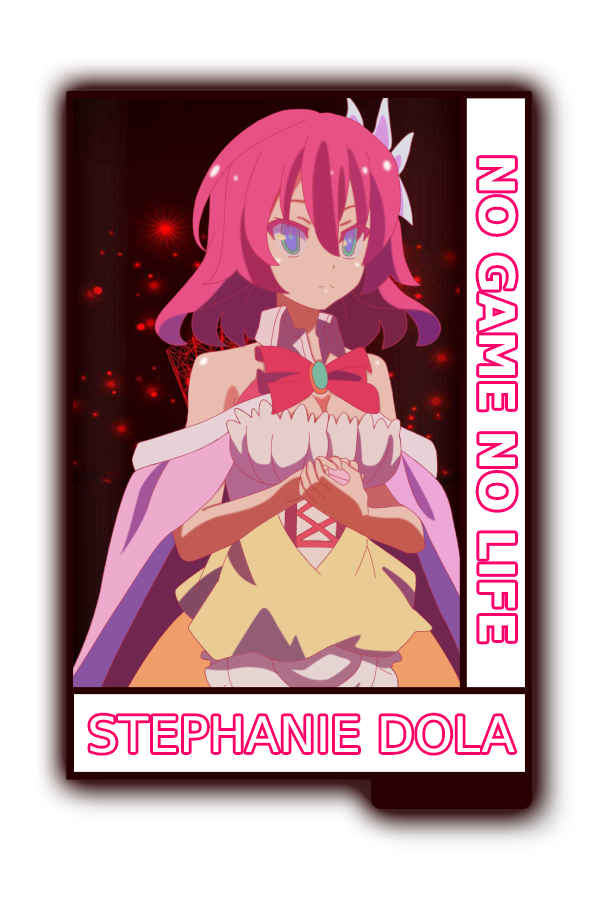
<style>
.page{position:relative;width:600px;height:900px;background:#ffffff}
.page>*{position:absolute;margin:0}
.t1{font:48.8px "MADETOMMY-Bold";color:#ffffff}
.t2{font:49px "CoolveticaRg-Regular";color:#ffffff}
</style>
<div class="page">
<p class="t1" style="left:478px;top:158px;width:38px;height:484px;rotate:90deg">NO GAME NO LIFE</p>
<p class="t2" style="left:90px;top:715px;width:425px;height:38px">STEPHANIE DOLA</p>
</div>
